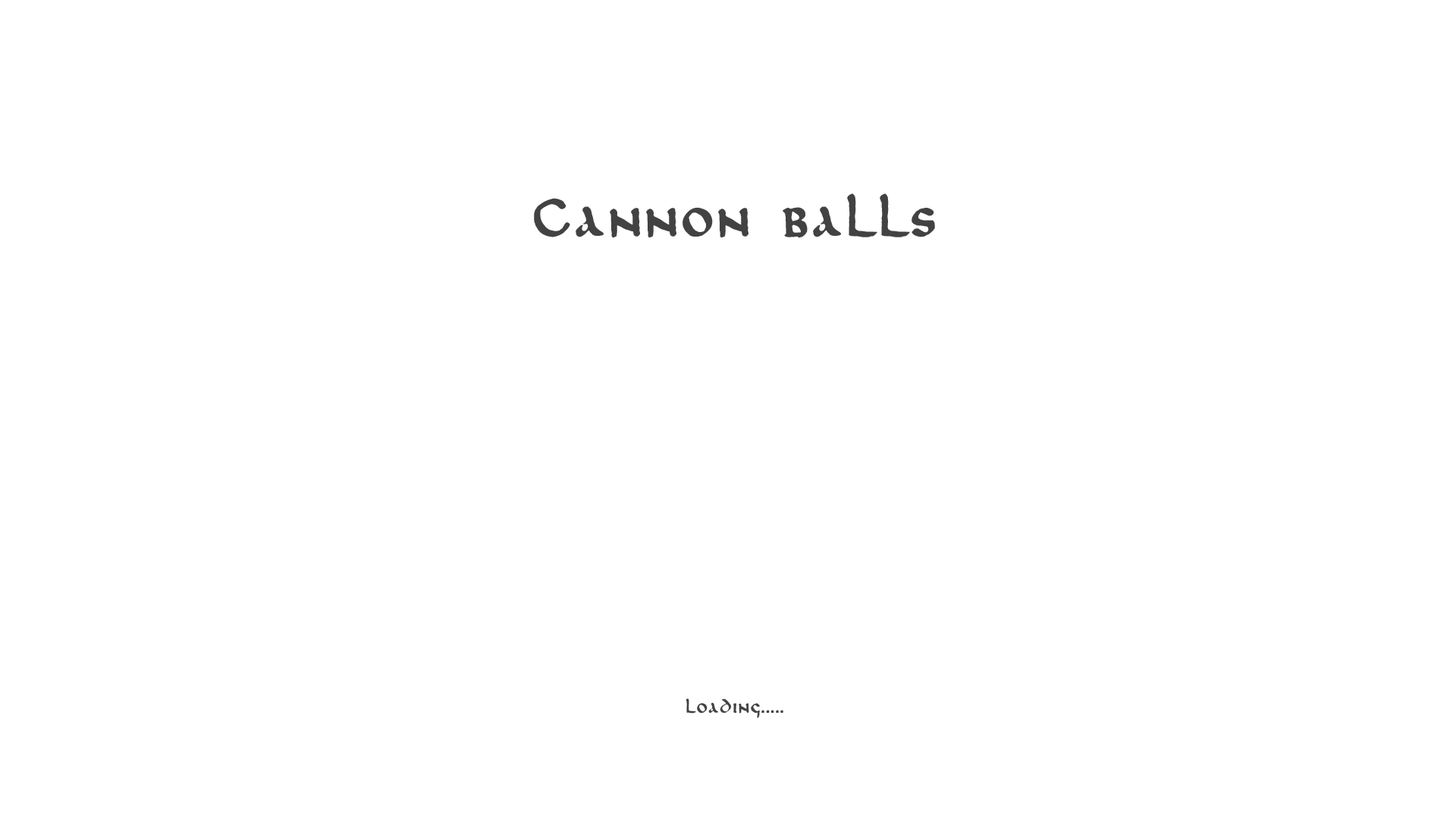
<style>
.page{position:relative;width:1456px;height:819px;background:#ffffff}
.page>*{position:absolute;margin:0}
.t1{font:54.6px "DKNorthumbria";letter-spacing:0.05em;color:#424242}
.t2{font:18.2px "DKNorthumbria";letter-spacing:0.05em;color:#424242}
</style>
<div class="page">
<p class="t1" style="left:534px;top:193px;width:401px;height:45px">Cannon balls</p>
<p class="t2" style="left:686px;top:698px;width:97px;height:20px">loading.....</p>
</div>
